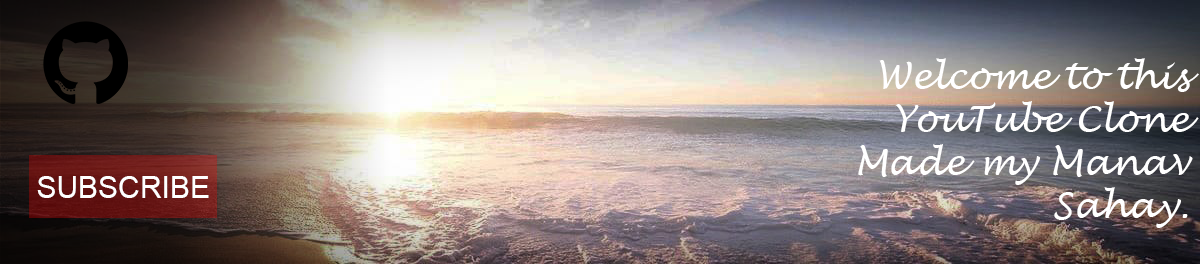
<style>
.page{position:relative;width:1200px;height:264px}
.page>*{position:absolute;margin:0}
.t1{font:36px "LucidaHandwriting-Italic";color:#ffffff}
.t2{font:30px "ArialMT";color:#ffffff}
</style>
<div class="page">
<p class="t1" style="left:858px;top:58px;width:341px;height:170px;text-align:right">Welcome to this YouTube Clone<br>Made my Manav Sahay.</p>
<p class="t2" style="left:37px;top:176px;width:172px;height:22px">SUBSCRIBE</p>
</div>
